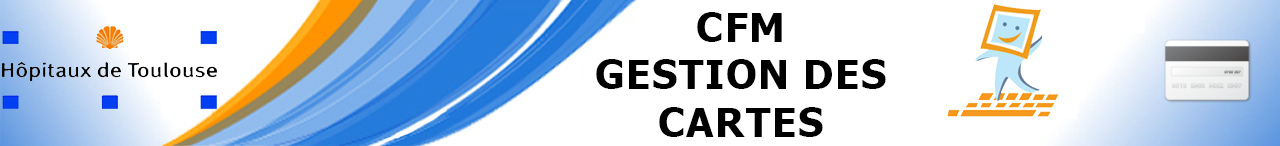
<style>
.page{position:relative;width:1280px;height:146px;background:#ffffff}
.page>*{position:absolute;margin:0}
.t1{font:39.5px "Tahoma-Bold";letter-spacing:0.045em;color:#000000}
</style>
<div class="page">
<p class="t1" style="left:596px;top:12px;width:290px;height:125px;text-align:center">CFM<br>GESTION DES<br>CARTES</p>
</div>
